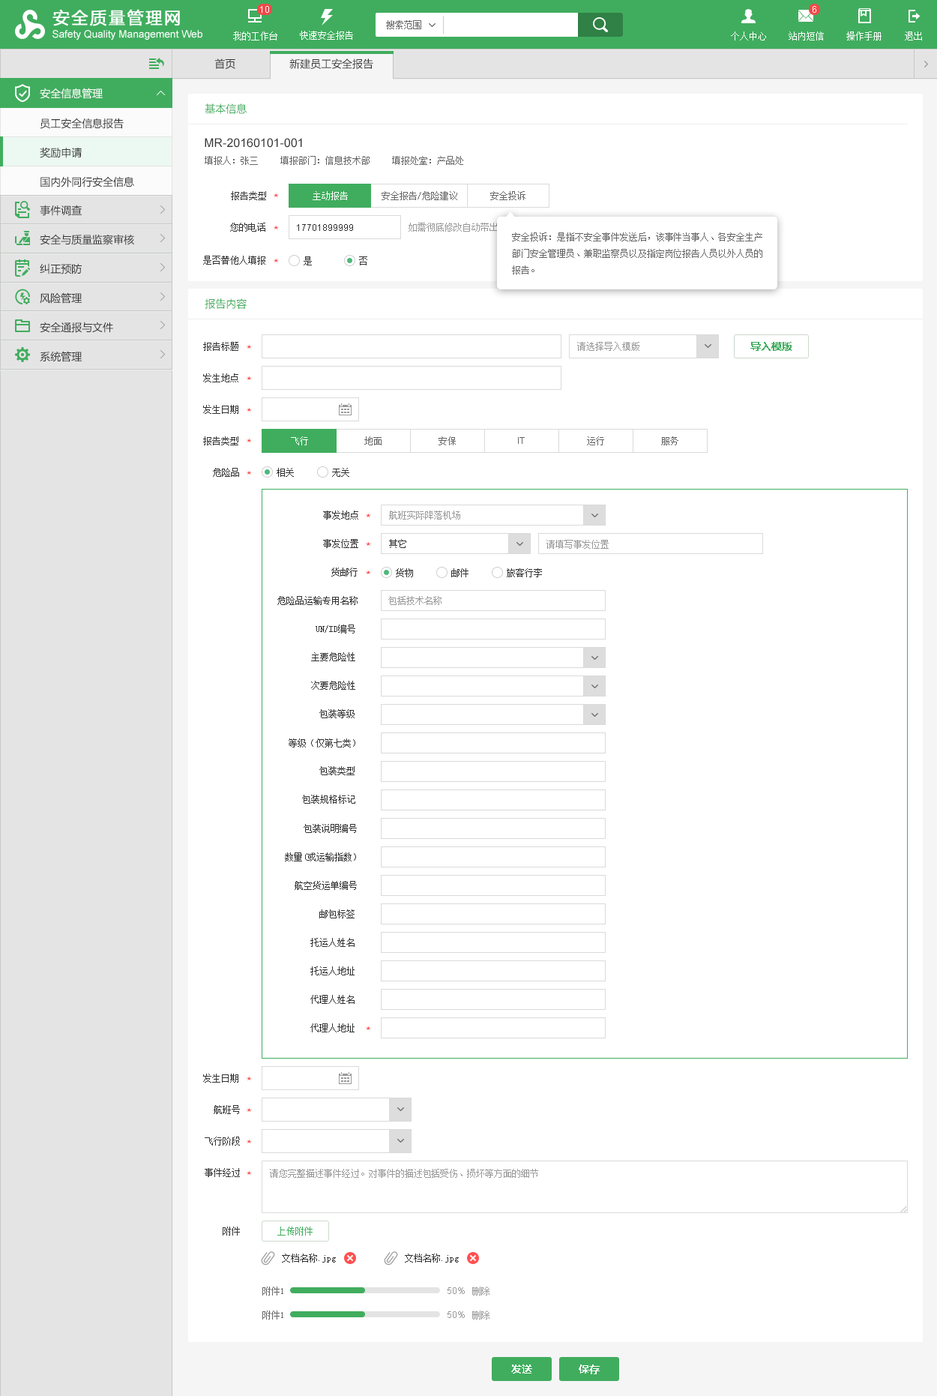
<style>
.page{position:relative;width:937px;height:1396px;background:#ffffff}
.page>*{position:absolute;margin:0}
.t1{font:10.5px "MicrosoftYaHei";color:#333333}
.t2{font:10.5px "MicrosoftYaHei";color:#ffffff}
.t3{font:10.5px "MicrosoftYaHei";color:#40ad5e}
.t4{font:10.5px/29.2px "MicrosoftYaHei";color:#333333}
.t5{font:12px "ArialMT";color:#333333}
.t6{font:9px "SimSun";color:#666666}
.t7{font:9px "SimSun";color:#333333}
.t8{font:12px "AppleSymbols";color:#ff0000}
.t9{font:9px "SimSun";color:#ffffff}
.t10{font:9px "ArialMT";color:#333333}
.t11{font:9px "SimSun"}
.t12{font:9px/16.5px "SimSun";color:#666666}
.t13{font:9px "SimSun";color:#999999}
.t14{font:10.5px "MicrosoftYaHei-Bold";color:#40ad5e}
.t15{font:9px "ArialMT";color:#666666}
.t16{font:9px "SimSun";color:#40ad5e}
.t17{font:9px "ArialMT";color:#999999}
.t18{font:10.5px "MicrosoftYaHei-Bold";color:#ffffff}
</style>
<div class="page">
<p class="t1" style="left:214px;top:58px;width:21px;height:11px">首页</p>
<p class="t1" style="left:289px;top:58px;width:84px;height:11px">新建员工安全报告</p>
<p class="t2" style="left:40px;top:88px;width:63px;height:11px">安全信息管理</p>
<p class="t3" style="left:205px;top:103px;width:42px;height:11px">基本信息</p>
<p class="t4" style="left:40px;top:118px;width:94px;height:69px">员工安全信息报告<br>奖励申请<br>国内外同行安全信息</p>
<p class="t5" style="left:205px;top:138px;width:97px;height:10px">MR-20160101-001</p>
<p class="t6" style="left:205px;top:156px;width:53px;height:9px">填报人：张三</p>
<p class="t6" style="left:280px;top:156px;width:90px;height:9px">填报部门：信息技术部</p>
<p class="t6" style="left:392px;top:156px;width:71px;height:9px">填报处室：产品处</p>
<p class="t7" style="left:231px;top:191px;width:35px;height:9px">报告类型</p>
<p class="t8" style="left:274px;top:193px;width:5px;height:4px">＊</p>
<p class="t9" style="left:313px;top:191px;width:35px;height:9px">主动报告</p>
<p class="t6" style="left:382px;top:191px;width:75px;height:9px">安全报告/危险建议</p>
<p class="t6" style="left:490px;top:191px;width:36px;height:9px">安全投诉</p>
<p class="t4" style="left:40px;top:205px;width:94px;height:157px">事件调查<br>安全与质量监察审核<br>纠正预防<br>风险管理<br>安全通报与文件<br>系统管理</p>
<p class="t7" style="left:230px;top:223px;width:35px;height:9px">您的电话</p>
<p class="t8" style="left:274px;top:226px;width:5px;height:3px">＊</p>
<p class="t10" style="left:297px;top:224px;width:56px;height:7px">17701899999</p>
<p class="t11" style="left:409px;top:223px;width:223px;height:9px">如需彻底修改自动带出的联系方式，请前往人事系统修改</p>
<p class="t12" style="left:512px;top:232px;width:251px;height:42px">安全投诉：是指不安全事件发送后，该事件当事人、各安全生产<br>部门安全管理员、兼职监察员以及指定岗位报告人员以外人员的<br>报告。</p>
<p class="t7" style="left:203px;top:256px;width:62px;height:9px">是否替他人填报</p>
<p class="t7" style="left:304px;top:256px;width:8px;height:9px">是</p>
<p class="t7" style="left:359px;top:256px;width:8px;height:9px">否</p>
<p class="t8" style="left:274px;top:259px;width:5px;height:3px">＊</p>
<p class="t3" style="left:205px;top:298px;width:42px;height:11px">报告内容</p>
<p class="t7" style="left:203px;top:342px;width:35px;height:9px">报告标题</p>
<p class="t13" style="left:577px;top:342px;width:63px;height:9px">请选择导入模版</p>
<p class="t14" style="left:751px;top:342px;width:41px;height:9px">导入模版</p>
<p class="t8" style="left:247px;top:345px;width:5px;height:4px">＊</p>
<p class="t7" style="left:203px;top:373px;width:35px;height:9px">发生地点</p>
<p class="t8" style="left:247px;top:376px;width:5px;height:4px">＊</p>
<p class="t7" style="left:203px;top:405px;width:35px;height:9px">发生日期</p>
<p class="t8" style="left:247px;top:408px;width:5px;height:4px">＊</p>
<p class="t7" style="left:203px;top:436px;width:35px;height:9px">报告类型</p>
<p class="t9" style="left:291px;top:436px;width:17px;height:9px">飞行</p>
<p class="t6" style="left:364px;top:436px;width:18px;height:9px">地面</p>
<p class="t6" style="left:439px;top:436px;width:17px;height:9px">安保</p>
<p class="t15" style="left:518px;top:437px;width:7px;height:7px">IT</p>
<p class="t6" style="left:587px;top:436px;width:17px;height:9px">运行</p>
<p class="t6" style="left:661px;top:436px;width:18px;height:9px">服务</p>
<p class="t8" style="left:247px;top:439px;width:5px;height:3px">＊</p>
<p class="t7" style="left:213px;top:468px;width:26px;height:9px">危险品</p>
<p class="t8" style="left:247px;top:471px;width:5px;height:4px">＊</p>
<p class="t7" style="left:277px;top:468px;width:17px;height:9px">相关</p>
<p class="t7" style="left:332px;top:468px;width:17px;height:9px">无关</p>
<p class="t7" style="left:323px;top:511px;width:35px;height:9px">事发地点</p>
<p class="t8" style="left:366px;top:514px;width:5px;height:3px">＊</p>
<p class="t13" style="left:389px;top:511px;width:71px;height:9px">航班实际降落机场</p>
<p class="t7" style="left:323px;top:539px;width:35px;height:9px">事发位置</p>
<p class="t8" style="left:366px;top:542px;width:5px;height:4px">＊</p>
<p class="t7" style="left:389px;top:539px;width:17px;height:9px">其它</p>
<p class="t13" style="left:547px;top:540px;width:62px;height:9px">请填写事发位置</p>
<p class="t7" style="left:331px;top:568px;width:27px;height:9px">货邮行</p>
<p class="t7" style="left:396px;top:568px;width:17px;height:9px">货物</p>
<p class="t7" style="left:451px;top:568px;width:18px;height:9px">邮件</p>
<p class="t7" style="left:507px;top:568px;width:35px;height:9px">旅客行李</p>
<p class="t8" style="left:366px;top:571px;width:5px;height:3px">＊</p>
<p class="t7" style="left:277px;top:596px;width:81px;height:9px">危险品运输专用名称</p>
<p class="t13" style="left:388px;top:596px;width:54px;height:9px">包括技术名称</p>
<p class="t7" style="left:316px;top:625px;width:39px;height:9px">UN/ID编号</p>
<p class="t7" style="left:311px;top:652px;width:44px;height:9px">主要危险性</p>
<p class="t7" style="left:311px;top:681px;width:44px;height:9px">次要危险性</p>
<p class="t7" style="left:319px;top:709px;width:36px;height:9px">包装等级</p>
<p class="t7" style="left:289px;top:739px;width:66px;height:9px">等级（仅第七类）</p>
<p class="t7" style="left:319px;top:766px;width:36px;height:9px">包装类型</p>
<p class="t7" style="left:302px;top:795px;width:53px;height:9px">包装规格标记</p>
<p class="t7" style="left:304px;top:824px;width:53px;height:9px">包装说明编号</p>
<p class="t7" style="left:285px;top:853px;width:71px;height:9px">数量(或运输指数）</p>
<p class="t7" style="left:295px;top:881px;width:62px;height:9px">航空货运单编号</p>
<p class="t7" style="left:319px;top:910px;width:36px;height:9px">邮包标签</p>
<p class="t7" style="left:310px;top:938px;width:45px;height:9px">托运人姓名</p>
<p class="t7" style="left:310px;top:967px;width:45px;height:9px">托运人地址</p>
<p class="t7" style="left:310px;top:995px;width:45px;height:9px">代理人姓名</p>
<p class="t7" style="left:310px;top:1024px;width:45px;height:9px">代理人地址</p>
<p class="t8" style="left:366px;top:1027px;width:5px;height:3px">＊</p>
<p class="t7" style="left:203px;top:1074px;width:35px;height:9px">发生日期</p>
<p class="t8" style="left:247px;top:1077px;width:5px;height:4px">＊</p>
<p class="t7" style="left:214px;top:1105px;width:26px;height:9px">航班号</p>
<p class="t8" style="left:247px;top:1108px;width:5px;height:4px">＊</p>
<p class="t7" style="left:205px;top:1137px;width:35px;height:9px">飞行阶段</p>
<p class="t8" style="left:247px;top:1140px;width:5px;height:4px">＊</p>
<p class="t7" style="left:205px;top:1168px;width:35px;height:9px">事件经过</p>
<p class="t13" style="left:270px;top:1169px;width:268px;height:9px">请您完整描述事件经过。对事件的描述包括受伤、损坏等方面的细节</p>
<p class="t8" style="left:247px;top:1171px;width:5px;height:4px">＊</p>
<p class="t7" style="left:223px;top:1227px;width:17px;height:9px">附件</p>
<p class="t16" style="left:277px;top:1227px;width:36px;height:9px">上传附件</p>
<p class="t7" style="left:282px;top:1254px;width:54px;height:9px">文档名称.jpg</p>
<p class="t7" style="left:405px;top:1254px;width:54px;height:9px">文档名称.jpg</p>
<p class="t6" style="left:262px;top:1287px;width:21px;height:9px">附件1</p>
<p class="t17" style="left:448px;top:1288px;width:17px;height:6px">50%</p>
<p class="t13" style="left:472px;top:1287px;width:18px;height:9px">删除</p>
<p class="t6" style="left:262px;top:1311px;width:21px;height:9px">附件1</p>
<p class="t17" style="left:448px;top:1312px;width:17px;height:6px">50%</p>
<p class="t13" style="left:472px;top:1311px;width:18px;height:9px">删除</p>
<p class="t18" style="left:511px;top:1365px;width:21px;height:9px">发送</p>
<p class="t18" style="left:579px;top:1365px;width:21px;height:10px">保存</p>
</div>
